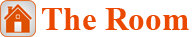
<style>
.page{position:relative;width:193px;height:37px;background:#ffffff}
.page>*{position:absolute;margin:0}
.t1{font:50px "AngsanaNew-Bold";color:#eb4800}
</style>
<div class="page">
<p class="t1" style="left:42px;top:8px;width:147px;height:22px">The Room</p>
</div>
